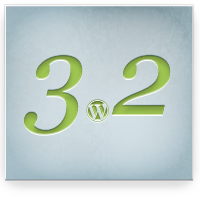
<style>
.page{position:relative;width:200px;height:197px}
.page>*{position:absolute;margin:0}
.t1{font:110px "Georgia-Italic"}
</style>
<div class="page">
<p class="t1" style="left:24px;top:55px;width:147px;height:80px">3 2</p>
<p class="t1" style="left:24px;top:55px;width:147px;height:80px">3 2</p>
</div>
